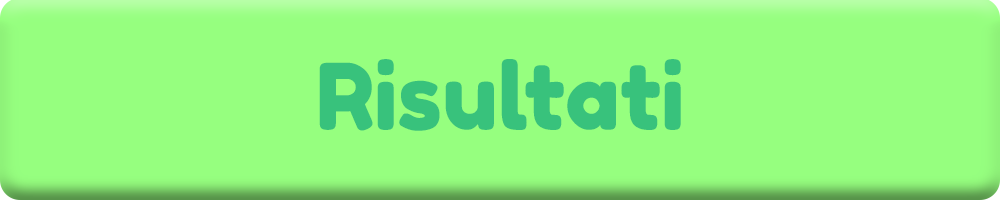
<style>
.page{position:relative;width:1000px;height:200px;background:#96ff7f}
.page>*{position:absolute;margin:0}
.t1{font:91.7px "FredokaOne-Regular";color:#38c27c}
</style>
<div class="page">
<p class="t1" style="left:319px;top:59px;width:362px;height:72px">Risultati</p>
</div>
